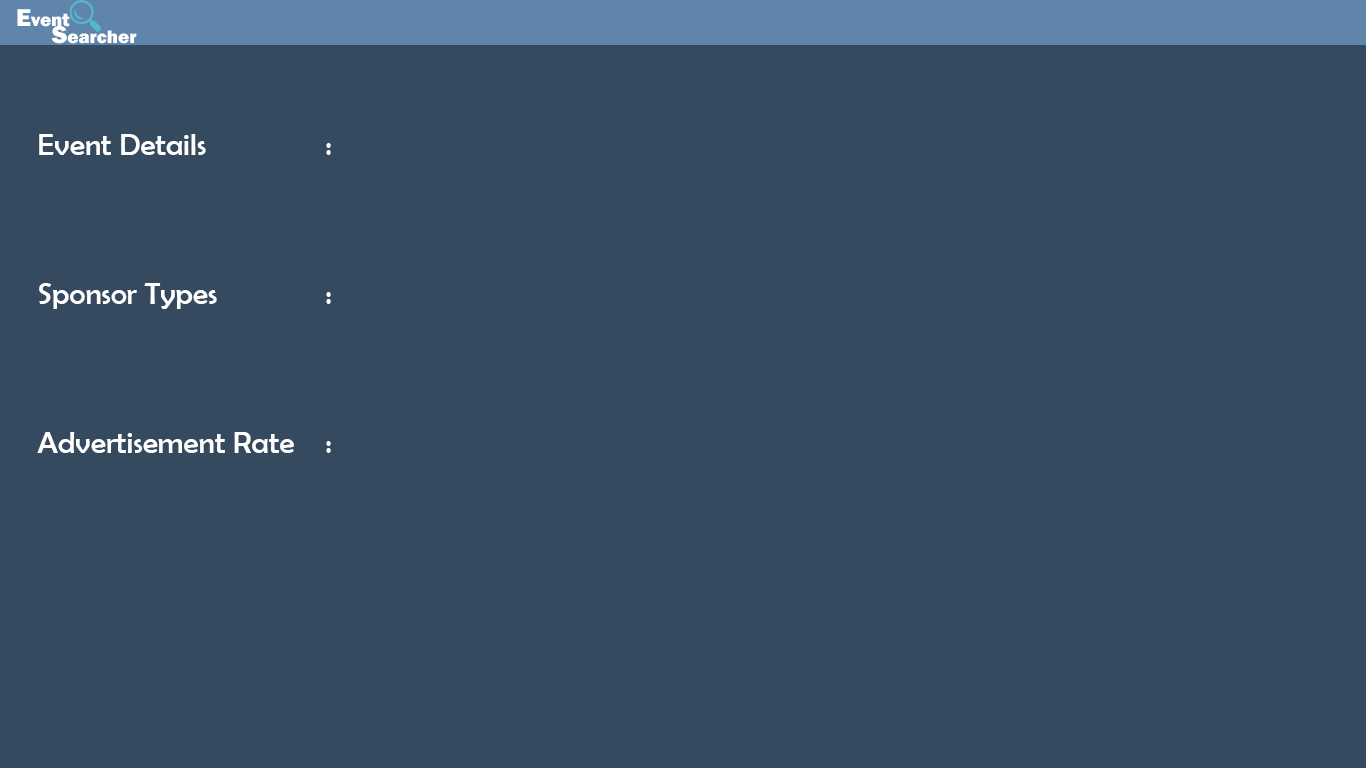
<style>
.page{position:relative;width:1366px;height:768px;background:#35495f}
.page>*{position:absolute;margin:0}
.t1{font:18.8px "FranklinGothic-Heavy";color:#ffffff}
.t2{font:25.1px "FranklinGothic-Heavy";color:#ffffff}
.t3{font:31px "BerlinSansFB-Reg";color:#fefefe}
</style>
<div class="page">
<p class="t1" style="left:17px;top:9px;width:53px;height:18px"><span class="t2">E</span>vent</p>
<p class="t1" style="left:51px;top:26px;width:86px;height:18px"><span class="t2">S</span>earcher</p>
<p class="t3" style="left:37px;top:134px;width:294px;height:319px">Event Details    : <br><br><br><br>Sponsor Types    :<br>  <br>              <br><br>Advertisement Rate :</p>
</div>
